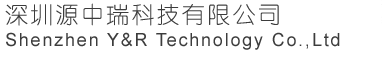
<style>
.page{position:relative;width:382px;height:61px;background:#ffffff}
.page>*{position:absolute;margin:0}
.t1{font:18px/24px "ArialMT";letter-spacing:0.1em;color:#3c3c3c}
.t2{font:23px/24px "YouYuan";letter-spacing:0.1em;color:#3c3c3c}
</style>
<div class="page">
<p class="t1" style="left:5px;top:3px;width:335px;height:47px"><span class="t2">深圳源中瑞科技有限公司<br></span>Shenzhen Y&amp;R Technology Co.,Ltd</p>
</div>
